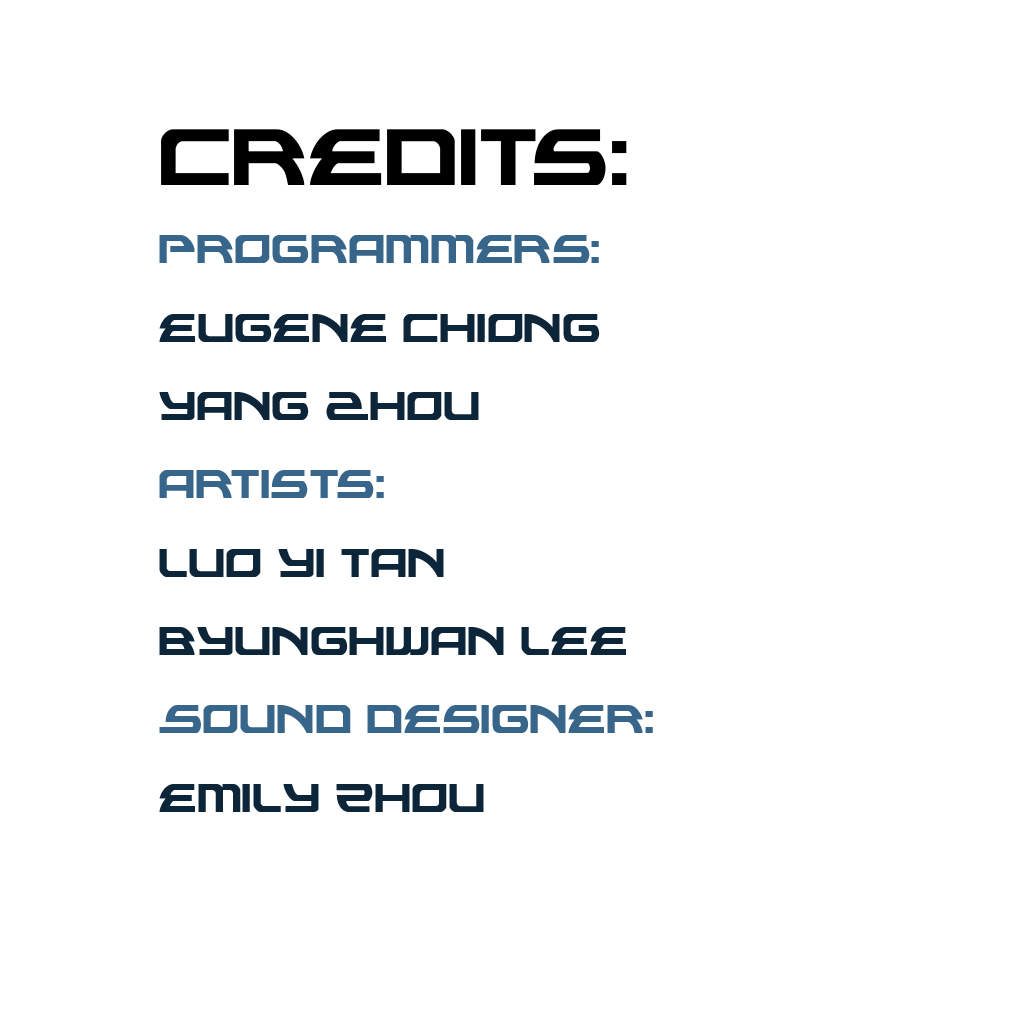
<style>
.page{position:relative;width:1024px;height:1024px;background:#ffffff}
.page>*{position:absolute;margin:0}
.t1{font:65.3px "Alexis";color:#0d2539;scale:0.79 1}
.t2{font:130px "Alexis";color:#000000;scale:0.79 1}
.t3{font:65.3px "Alexis";color:#38658a;scale:0.79 1}
</style>
<div class="page">
<p class="t1" style="left:159px;top:129px;width:494px;height:683px"><span class="t2">Credits:<br></span><span class="t3">Programmers:<br></span>Eugene Chiong<br>Yang Zhou<br><span class="t3">Artists:<br></span>Luo Yi tan<br>byunghwan lee<br><span class="t3">Sound designer:<br></span>emily zhou</p>
</div>
